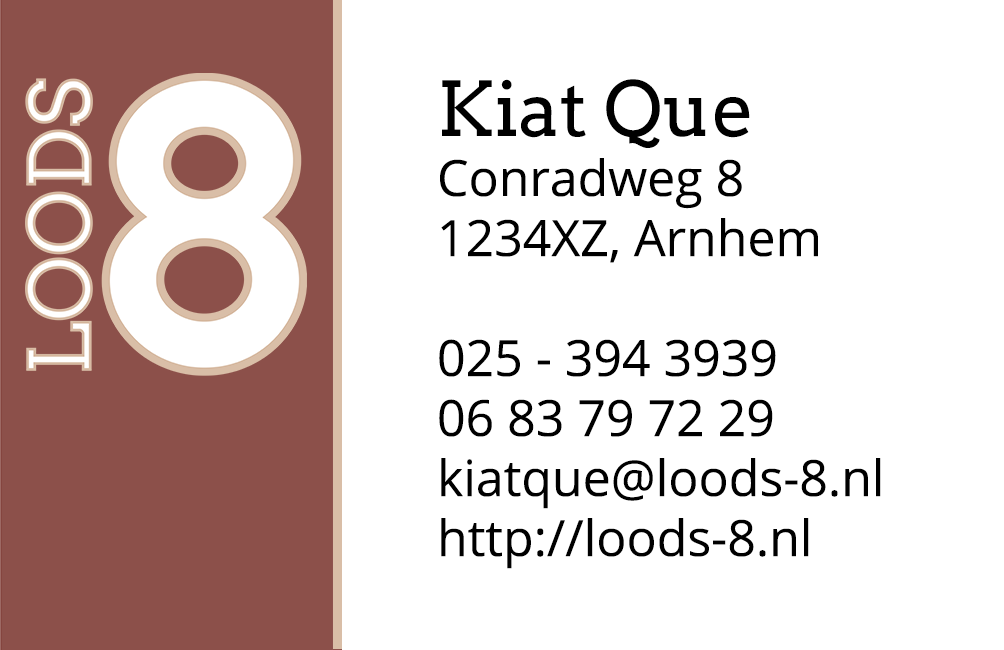
<style>
.page{position:relative;width:1004px;height:650px;background:#ffffff}
.page>*{position:absolute;margin:0}
.t1{font:50px "OpenSans";color:#000000}
.t2{font:75px "Arvo";color:#000000}
</style>
<div class="page">
<p class="t1" style="left:439px;top:79px;width:442px;height:490px"><span class="t2">Kiat Que<br></span>Conradweg 8<br>1234XZ, Arnhem<br><br>025 - 394 3939<br>06 83 79 72 29<br>kiatque@loods-8.nl<br>http://loods-8.nl</p>
</div>
